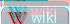
<style>
.page{position:relative;width:70px;height:24px}
.page>*{position:absolute;margin:0}
.t1{font:24px "Vrinda"}
</style>
<div class="page">
<p class="t1" style="left:31px;top:5px;width:25px;height:12px">wiki</p>
</div>
